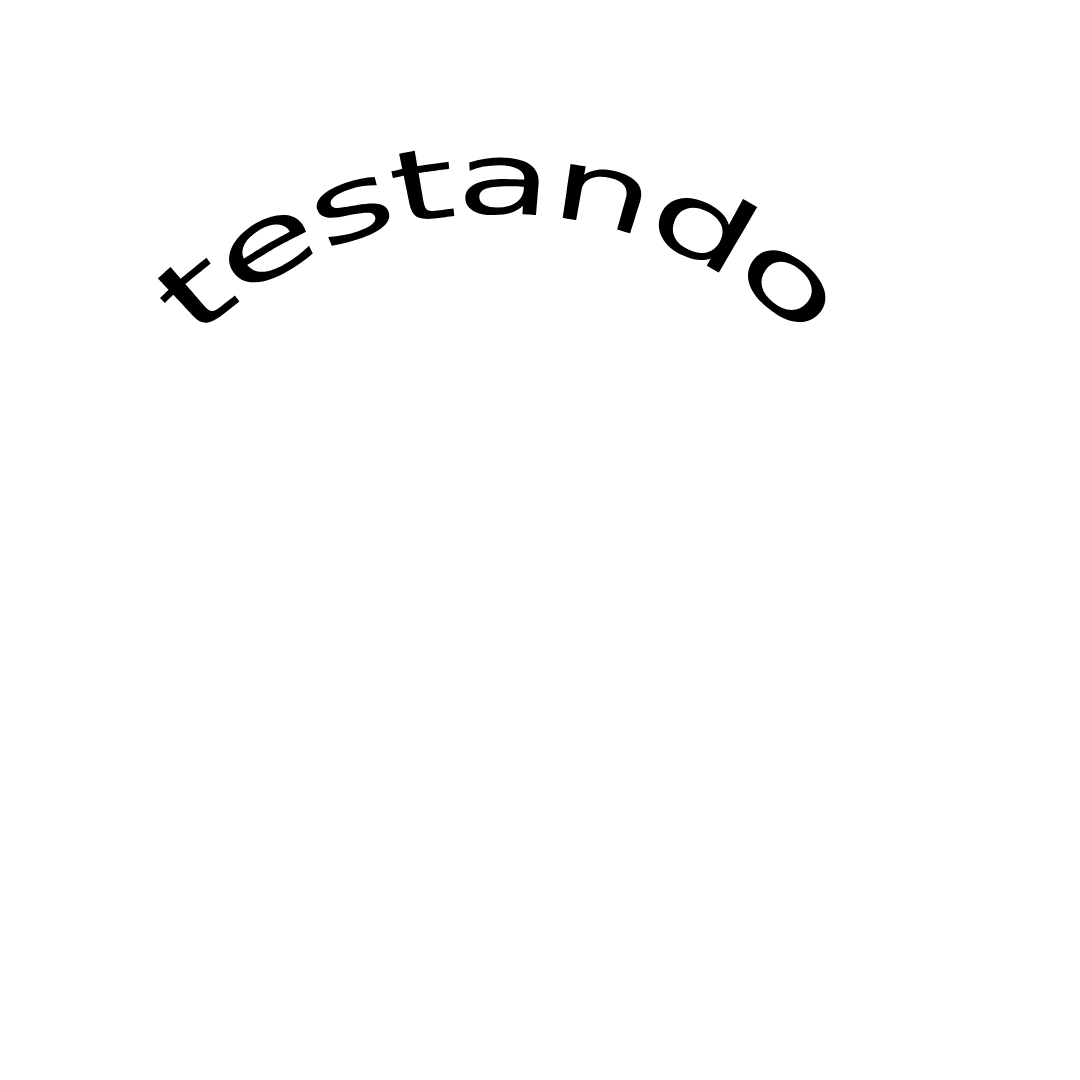
<style>
.page{position:relative;width:1080px;height:1080px;background:#ffffff}
.page>*{position:absolute;margin:0}
.t1{font:100px "DejaVuSans";color:#000000}
</style>
<div class="page">
<p class="t1" style="left:158px;top:150px;width:669px;height:174px">testando</p>
</div>
